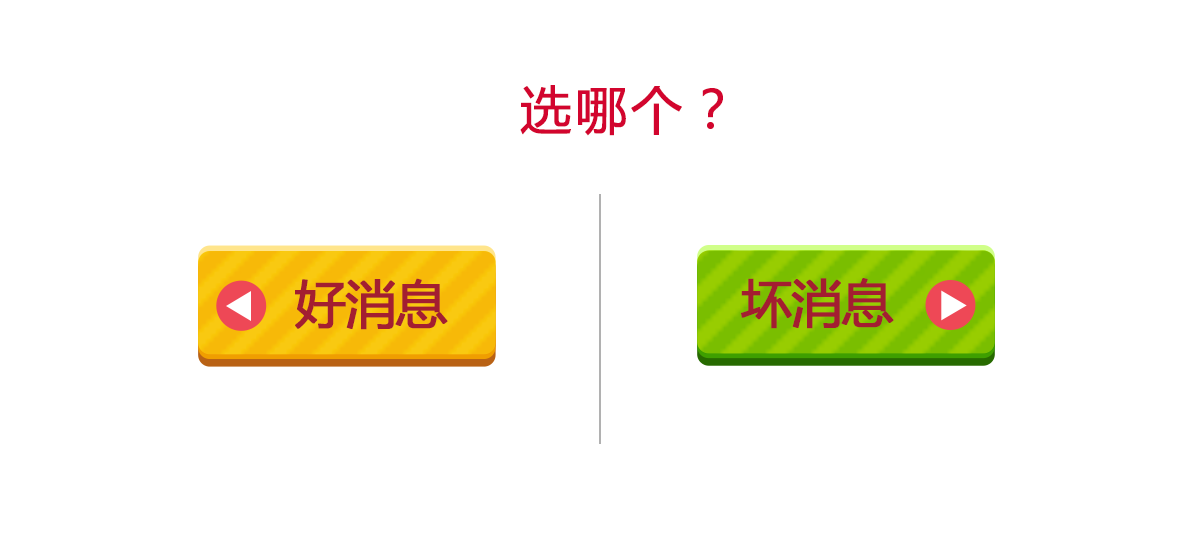
<style>
.page{position:relative;width:1200px;height:550px;background:#ffffff}
.page>*{position:absolute;margin:0}
.t1{font:51.4px "MicrosoftYaHei";letter-spacing:0.05em;color:#d2052e;font-weight:bold}
.t2{font:51.4px "MicrosoftYaHei";letter-spacing:-0.041em;color:#a31e31;text-transform:uppercase;font-weight:bold}
.t3{font:51.2px "MicrosoftYaHei";letter-spacing:-0.041em;color:#a31e31;text-transform:uppercase;font-weight:bold}
</style>
<div class="page">
<p class="t1" style="left:520px;top:85px;width:203px;height:51px">选哪个？</p>
<p class="t2" style="left:295px;top:278px;width:153px;height:52px">好消息</p>
<p class="t3" style="left:741px;top:278px;width:153px;height:51px">坏消息</p>
</div>
